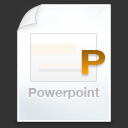
<style>
.page{position:relative;width:128px;height:128px;background:#333333}
.page>*{position:absolute;margin:0}
.t1{font:34.3px "HelveticaNeue-Bold";scale:1.2 1}
.t2{font:13px "HelveticaNeue-Bold";color:#cccccc}
</style>
<div class="page">
<p class="t1" style="left:81px;top:50px;width:25px;height:24px">P</p>
<p class="t2" style="left:28px;top:87px;width:72px;height:12px">Powerpoint</p>
</div>
